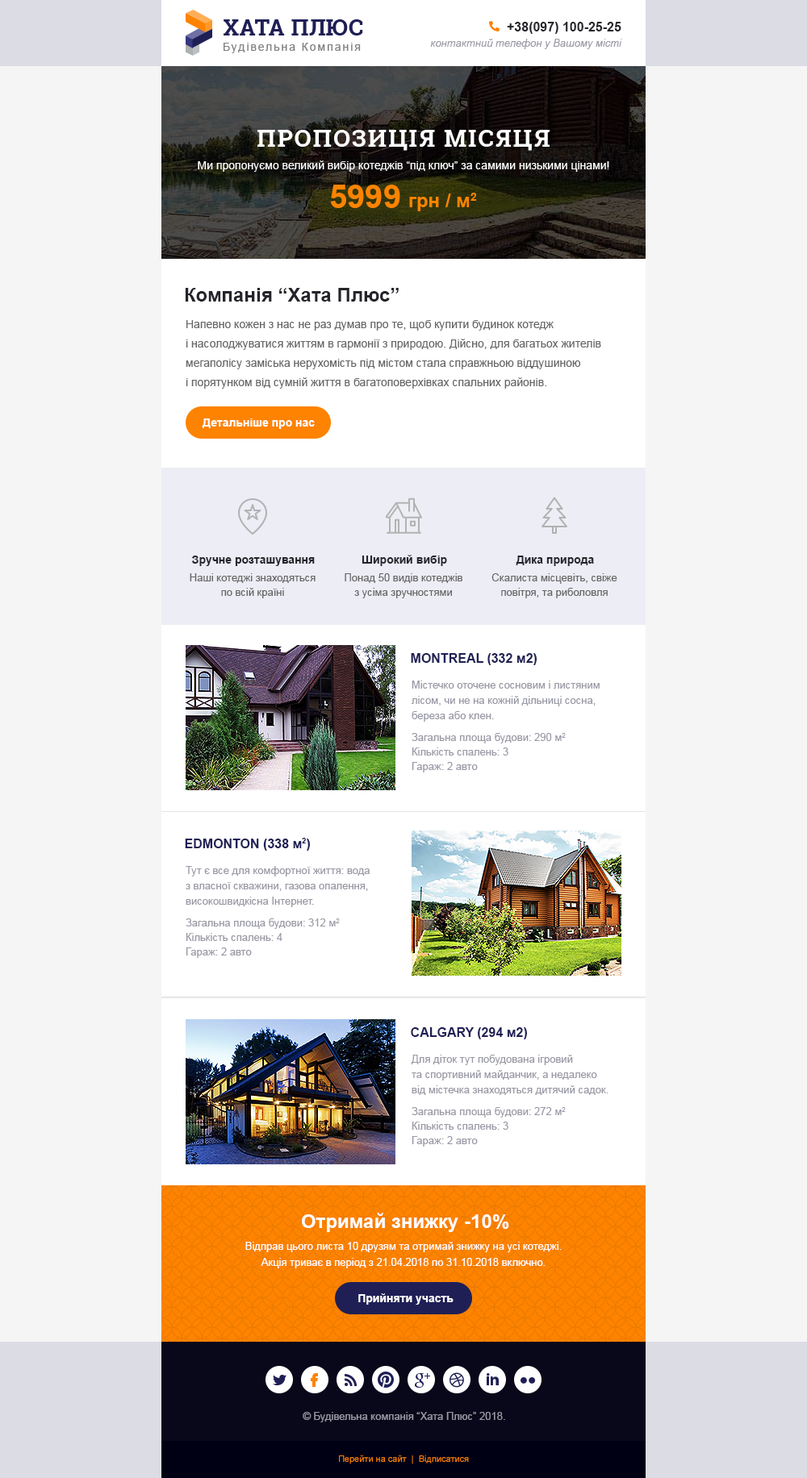
<style>
.page{position:relative;width:807px;height:1478px;background:#f5f5f5}
.page>*{position:absolute;margin:0}
.t1{font:12.9px "Arial-BoldMT";color:#25252c}
.t2{font:10.5px "Arial-ItalicMT";color:#9999a6}
.t3{font:19.4px "Arial-BoldMT";color:#24242b}
.t4{font:11.3px/19.4px "ArialMT";color:#666666}
.t5{font:11.3px "Arial-BoldMT";color:#ffffff}
.t6{font:11.3px "Arial-BoldMT";color:#24242b}
.t7{font:10.5px/14.5px "ArialMT";color:#666666}
.t8{font:12.9px "Arial-BoldMT";color:#1f1f56}
.t9{font:10.5px/15.3px "ArialMT";color:#9999a6}
.t10{font:10.5px/14.5px "ArialMT";color:#9999a6}
.t11{font:19.4px "Arial-BoldMT";color:#ffffff}
.t12{font:10.5px/16.1px "ArialMT";color:#ffffff}
.t13{font:10.5px "ArialMT";color:#9999a6}
.t14{font:8.9px "ArialMT";color:#fd8300}
</style>
<div class="page">
<p class="t1" style="left:507px;top:22px;width:114px;height:12px">+38(097) 100-25-25</p>
<p class="t2" style="left:430px;top:39px;width:192px;height:10px">контактний телефон у Вашому місті</p>
<p class="t3" style="left:185px;top:288px;width:213px;height:14px">Компанія “Хата Плюс”</p>
<p class="t4" style="left:186px;top:320px;width:415px;height:69px">Напевно кожен з нас не раз думав про те, щоб купити будинок котедж <br>і насолоджуватися життям в гармонії з природою. Дійсно, для багатьох жителів мегаполісу заміська нерухомість під містом стала справжньою віддушиною <br>і порятунком від сумній життя в багатоповерхівках спальних районів.</p>
<p class="t5" style="left:202px;top:419px;width:113px;height:10px">Детальніше про нас</p>
<p class="t6" style="left:192px;top:556px;width:123px;height:10px">Зручне розташування</p>
<p class="t6" style="left:361px;top:555px;width:86px;height:11px">Широкий вибір</p>
<p class="t6" style="left:515px;top:556px;width:79px;height:10px">Дика природа</p>
<p class="t7" style="left:190px;top:573px;width:125px;height:25px;text-align:center">Наші котеджі знаходяться по всій країні</p>
<p class="t7" style="left:344px;top:573px;width:118px;height:25px;text-align:center">Понад 50 видів котеджів<br>з усіма зручностями</p>
<p class="t7" style="left:491px;top:573px;width:126px;height:25px;text-align:center">Скалиста місцевіть, свіже повітря, та риболовля</p>
<p class="t8" style="left:411px;top:653px;width:126px;height:12px">MONTREAL (332 м2)</p>
<p class="t9" style="left:411px;top:681px;width:188px;height:41px">Містечко оточене сосновим і листяним лісом, чи не на кожній дільниці сосна, береза або клен.</p>
<p class="t10" style="left:411px;top:733px;width:154px;height:40px">Загальна площа будови: 290 м2<br>Кількість спалень: 3<br>Гараж: 2 авто</p>
<p class="t8" style="left:185px;top:838px;width:126px;height:13px">EDMONTON (338 м2)</p>
<p class="t9" style="left:186px;top:866px;width:183px;height:41px">Тут є все для комфортної життя: вода <br>з власної скважини, газова опалення, високошвидкісна Інтернет.</p>
<p class="t10" style="left:186px;top:919px;width:154px;height:39px">Загальна площа будови: 312 м2<br>Кількість спалень: 4<br>Гараж: 2 авто</p>
<p class="t8" style="left:411px;top:1028px;width:116px;height:12px">CALGARY (294 м2)</p>
<p class="t9" style="left:411px;top:1055px;width:197px;height:40px">Для діток тут побудована ігровий <br>та спортивний майданчик, а недалеко <br>від містечка знаходяться дитячий садок.</p>
<p class="t10" style="left:411px;top:1107px;width:154px;height:40px">Загальна площа будови: 272 м2<br>Кількість спалень: 3<br>Гараж: 2 авто</p>
<p class="t11" style="left:302px;top:1213px;width:207px;height:19px">Отримай знижку -10%</p>
<p class="t12" style="left:245px;top:1242px;width:316px;height:27px;text-align:center">Відправ цього листа 10 друзям та отримай знижку на усі котеджі.<br>Акція триває в період з 21.04.2018 по 31.10.2018 включно.</p>
<p class="t5" style="left:358px;top:1294px;width:95px;height:11px">Прийняти участь</p>
<p class="t13" style="left:302px;top:1412px;width:203px;height:11px">© Будівельна компанія “Хата Плюс” 2018.</p>
<p class="t14" style="left:339px;top:1455px;width:130px;height:10px">Перейти на сайт  |  Відписатися</p>
</div>
